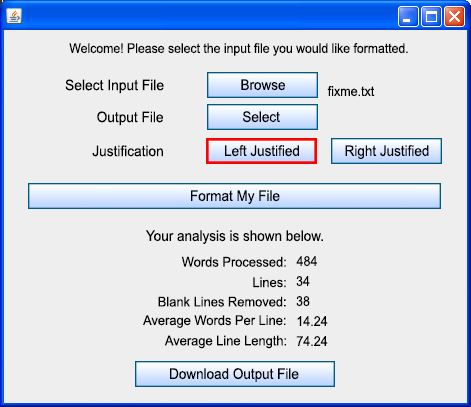
<style>
.page{position:relative;width:471px;height:407px;background:#eeeeee}
.page>*{position:absolute;margin:0}
.t1{font:13.3px "ArialMT";color:#000000;scale:0.92 1}
.t2{font:14.7px "ArialMT";color:#000000;scale:0.94 1}
.t3{font:14.7px "ArialMT";color:#000000;scale:0.92 1}
.t4{font:13.6px "ArialMT";color:#000000;scale:0.92 1}
.t5{font:14.7px "ArialMT";color:#000000;scale:0.93 1}
.t6{font:13.6px "ArialMT";color:#000000;scale:0.95 1}
</style>
<div class="page">
<p class="t1" style="left:69px;top:43px;width:339px;height:13px">Welcome! Please select the input file you would like formatted.</p>
<p class="t2" style="left:65px;top:79px;width:99px;height:15px">Select Input File</p>
<p class="t3" style="left:241px;top:79px;width:44px;height:12px">Browse</p>
<p class="t4" style="left:327px;top:86px;width:48px;height:11px">fixme.txt</p>
<p class="t5" style="left:97px;top:111px;width:66px;height:15px">Output File</p>
<p class="t3" style="left:242px;top:111px;width:38px;height:12px">Select</p>
<p class="t5" style="left:92px;top:145px;width:71px;height:12px">Justification</p>
<p class="t3" style="left:225px;top:145px;width:74px;height:12px">Left Justified</p>
<p class="t3" style="left:345px;top:145px;width:84px;height:14px">Right Justified</p>
<p class="t3" style="left:191px;top:190px;width:89px;height:14px">Format My File</p>
<p class="t3" style="left:146px;top:230px;width:177px;height:14px">Your analysis is shown below.</p>
<p class="t6" style="left:181px;top:256px;width:105px;height:11px">Words Processed:</p>
<p class="t4" style="left:296px;top:256px;width:21px;height:11px">484</p>
<p class="t6" style="left:253px;top:277px;width:33px;height:11px">Lines:</p>
<p class="t4" style="left:296px;top:276px;width:14px;height:11px">34</p>
<p class="t6" style="left:158px;top:296px;width:128px;height:11px">Blank Lines Removed:</p>
<p class="t4" style="left:296px;top:296px;width:14px;height:11px">38</p>
<p class="t6" style="left:143px;top:315px;width:143px;height:13px">Average Words Per Line:</p>
<p class="t4" style="left:297px;top:316px;width:31px;height:10px">14.24</p>
<p class="t6" style="left:164px;top:335px;width:122px;height:14px">Average Line Length:</p>
<p class="t4" style="left:296px;top:336px;width:32px;height:10px">74.24</p>
<p class="t3" style="left:170px;top:368px;width:129px;height:14px">Download Output File</p>
</div>
